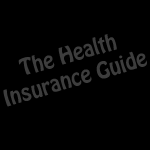
<style>
.page{position:relative;width:150px;height:150px;background:#000000}
.page>*{position:absolute;margin:0}
.t1{font:20.3px "Hobo";color:#3d3d3d}
</style>
<div class="page">
<p class="t1" style="left:3px;top:34px;width:144px;height:73px;text-align:center;rotate:-16deg">The Health<br>Insurance Guide</p>
</div>
